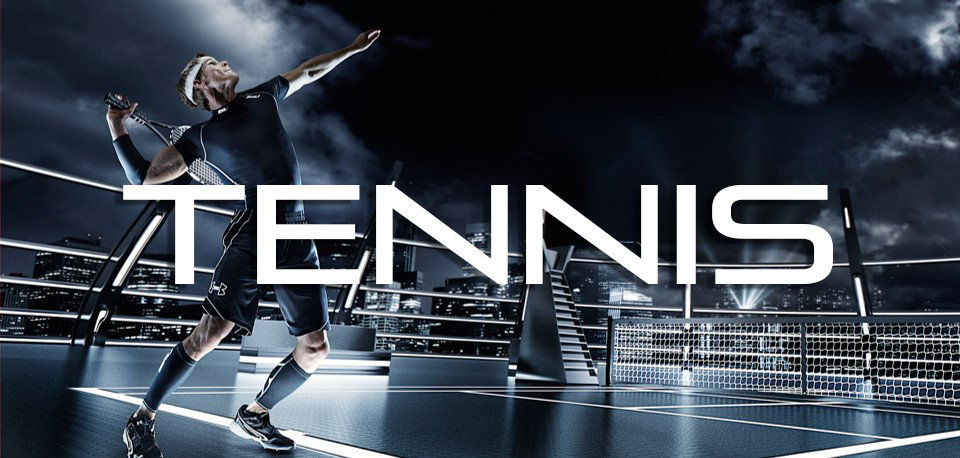
<style>
.page{position:relative;width:960px;height:458px}
.page>*{position:absolute;margin:0}
.t1{font:141.3px "PirulenRg-Regular";color:#ffffff}
</style>
<div class="page">
<p class="t1" style="left:123px;top:185px;width:710px;height:99px">tennis</p>
</div>
